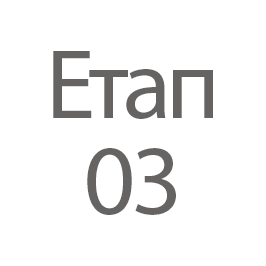
<style>
.page{position:relative;width:266px;height:266px;background:#ffffff}
.page>*{position:absolute;margin:0}
.t1{font:100px/31.8px "MyriadPro-Regular";letter-spacing:-0.05em;color:#666363}
</style>
<div class="page">
<p class="t1" style="left:53px;top:51px;width:160px;height:164px;text-align:center">Етап<br><br><br>03</p>
</div>
